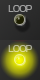
<style>
.page{position:relative;width:40px;height:80px}
.page>*{position:absolute;margin:0}
.t1{font:10.7px "SimianText-Orangutan";letter-spacing:-0.075em;color:#9f9f9f}
.t2{font:10.7px "SimianText-Orangutan";letter-spacing:-0.075em}
</style>
<div class="page">
<p class="t1" style="left:8px;top:5px;width:24px;height:7px">LOOP</p>
<p class="t2" style="left:8px;top:45px;width:24px;height:7px">LOOP</p>
</div>
